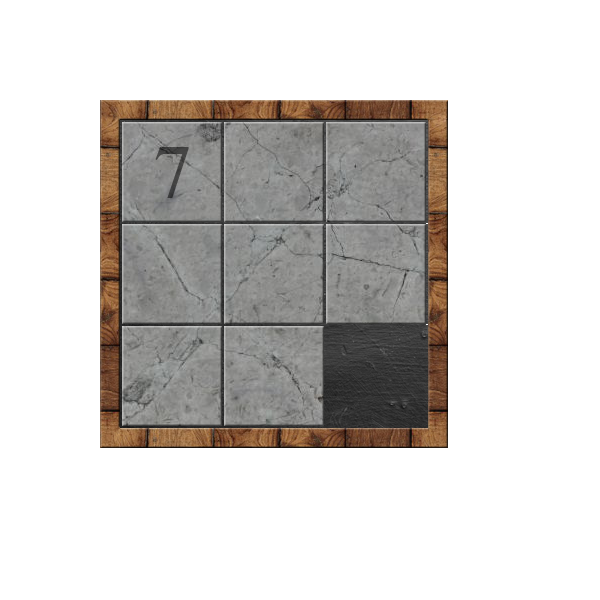
<style>
.page{position:relative;width:600px;height:600px;background:#ffffff}
.page>*{position:absolute;margin:0}
.t1{font:77px "Times-Roman";color:#424241}
</style>
<div class="page">
<p class="t1" style="left:155px;top:147px;width:34px;height:51px">7</p>
</div>
